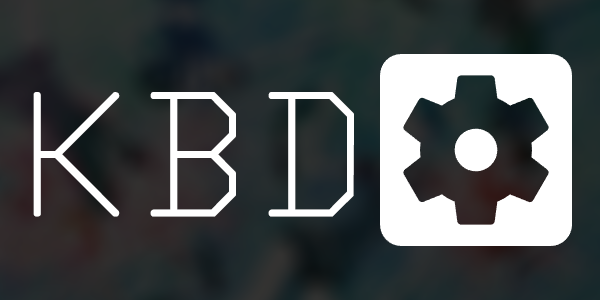
<style>
.page{position:relative;width:600px;height:300px}
.page>*{position:absolute;margin:0}
.t1{font:160px "SWMono";color:#ffffff}
</style>
<div class="page">
<p class="t1" style="left:33px;top:92px;width:321px;height:125px">KBD</p>
</div>
